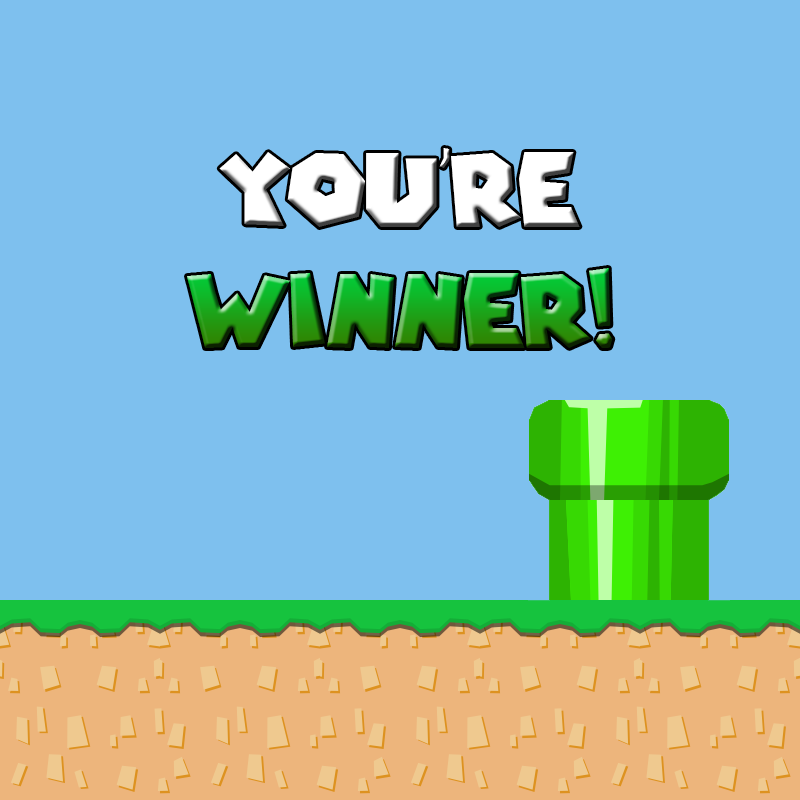
<style>
.page{position:relative;width:800px;height:800px;background:#7ec0ee}
.page>*{position:absolute;margin:0}
.t1{font:100px "SuperMarioGalaxy";color:#ffffff}
.t2{font:100px "SuperMarioGalaxy"}
</style>
<div class="page">
<p class="t1" style="left:219px;top:148px;width:361px;height:79px">You’re</p>
<p class="t2" style="left:187px;top:268px;width:426px;height:80px">!Winner</p>
</div>
